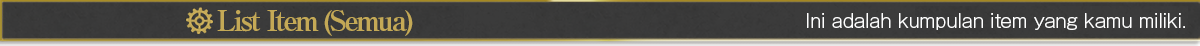
<style>
.page{position:relative;width:1200px;height:46px}
.page>*{position:absolute;margin:0}
.t1{font:28px "RyuminPro-ExBold";letter-spacing:-0.08em;color:#c4a956}
.t2{font:18px "GothicMB101Pro-Light";color:#ffffff}
</style>
<div class="page">
<p class="t1" style="left:217px;top:10px;width:196px;height:26px">List Item (Semua)</p>
<p class="t2" style="left:807px;top:13px;width:378px;height:17px">Ini adalah kumpulan item yang kamu miliki.</p>
</div>
